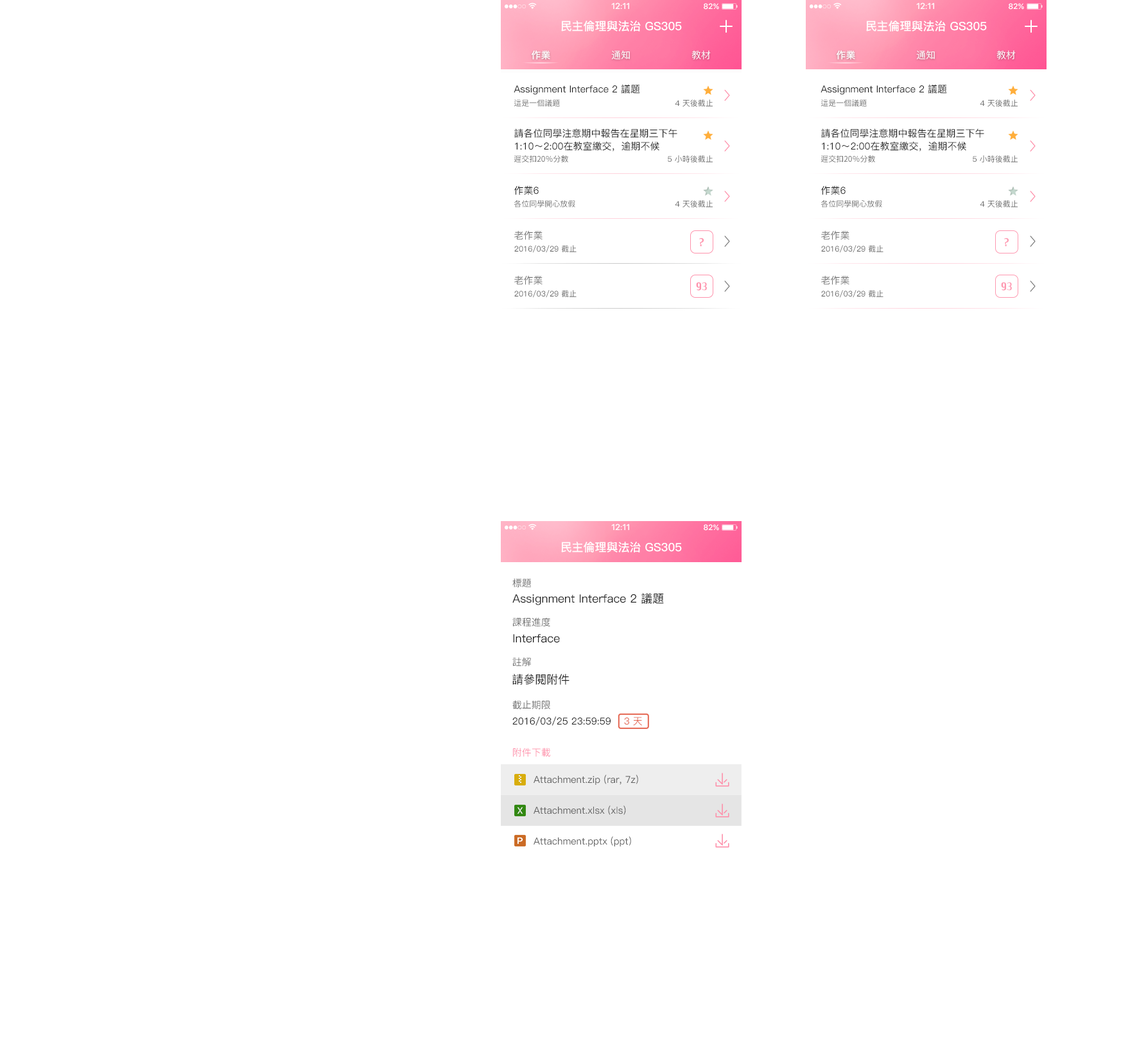
<style>
.page{position:relative;width:1130px;height:1055px;background:#ffffff}
.page>*{position:absolute;margin:0}
.t1{font:11.6px "PingFang-SC-Bold";color:#ffffff}
.t2{font:9.6px "PingFang-SC-Bold";color:#ffffff}
.t3{font:9.6px "PingFang-SC-Medium";color:#ffffff}
.t4{font:9.6px "PingFang-SC-Medium";color:#212121}
.t5{font:7.7px "GenJyuuGothic-Normal";color:#616161}
.t6{font:7.7px "PingFang-SC-Medium";color:#616161}
.t7{font:9.6px/12.8px "PingFang-SC-Medium";color:#212121}
.t8{font:9.6px "PingFang-SC-Medium";color:#757575}
.t9{font:11.6px "CreditValley-bold";color:#fe88a4}
.t10{font:8.3px "SFUIDisplay-Semibold"}
.t11{font:7.7px "SFUIDisplay-Semibold";letter-spacing:0.025em}
.t12{font:9.6px "GenJyuuGothic-Normal";color:#616161}
.t13{font:11.6px "PingFang-SC-Medium";color:#212121}
.t14{font:9.6px "PingFang-SC-Medium";color:#e36550}
.t15{font:9.6px "GenJyuuGothic-Normal";color:#fe8ea9}
.t16{font:9.6px "PingFang-SC-Medium";color:#616161}
</style>
<div class="page">
<p class="t1" style="left:561px;top:21px;width:121px;height:10px">民主倫理與法治 GS305</p>
<p class="t1" style="left:866px;top:21px;width:121px;height:10px">民主倫理與法治 GS305</p>
<p class="t2" style="left:532px;top:50px;width:18px;height:10px">作業</p>
<p class="t3" style="left:611px;top:50px;width:19px;height:10px">通知</p>
<p class="t3" style="left:691px;top:50px;width:20px;height:10px">教材</p>
<p class="t2" style="left:836px;top:50px;width:19px;height:10px">作業</p>
<p class="t3" style="left:916px;top:50px;width:19px;height:10px">通知</p>
<p class="t3" style="left:996px;top:50px;width:20px;height:10px">教材</p>
<p class="t4" style="left:514px;top:84px;width:126px;height:11px">Assignment Interface 2 議題</p>
<p class="t4" style="left:820px;top:84px;width:127px;height:11px">Assignment Interface 2 議題</p>
<p class="t5" style="left:514px;top:100px;width:46px;height:7px">這是一個議題</p>
<p class="t6" style="left:675px;top:100px;width:38px;height:7px">4 天後截止</p>
<p class="t5" style="left:820px;top:100px;width:47px;height:7px">這是一個議題</p>
<p class="t6" style="left:980px;top:100px;width:38px;height:7px">4 天後截止</p>
<p class="t7" style="left:514px;top:128px;width:163px;height:24px">請各位同學注意期中報告在星期三下午1:10～2:00在教室繳交，逾期不候</p>
<p class="t7" style="left:821px;top:128px;width:163px;height:24px">請各位同學注意期中報告在星期三下午1:10～2:00在教室繳交，逾期不候</p>
<p class="t5" style="left:514px;top:155px;width:54px;height:7px">遲交扣20％分數</p>
<p class="t6" style="left:668px;top:155px;width:45px;height:8px">5 小時後截止</p>
<p class="t5" style="left:820px;top:155px;width:55px;height:7px">遲交扣20％分數</p>
<p class="t6" style="left:973px;top:155px;width:45px;height:8px">5 小時後截止</p>
<p class="t4" style="left:514px;top:186px;width:25px;height:9px">作業6</p>
<p class="t4" style="left:821px;top:186px;width:24px;height:9px">作業6</p>
<p class="t5" style="left:514px;top:200px;width:61px;height:7px">各位同學開心放假</p>
<p class="t6" style="left:675px;top:200px;width:38px;height:8px">4 天後截止</p>
<p class="t5" style="left:820px;top:200px;width:62px;height:7px">各位同學開心放假</p>
<p class="t6" style="left:980px;top:200px;width:38px;height:8px">4 天後截止</p>
<p class="t8" style="left:514px;top:230px;width:28px;height:10px">老作業</p>
<p class="t8" style="left:821px;top:230px;width:28px;height:10px">老作業</p>
<p class="t6" style="left:514px;top:245px;width:62px;height:8px">2016/03/29 截止</p>
<p class="t9" style="left:699px;top:238px;width:5px;height:9px">?</p>
<p class="t6" style="left:821px;top:245px;width:62px;height:8px">2016/03/29 截止</p>
<p class="t9" style="left:1004px;top:238px;width:5px;height:9px">?</p>
<p class="t8" style="left:514px;top:275px;width:28px;height:10px">老作業</p>
<p class="t8" style="left:821px;top:275px;width:28px;height:10px">老作業</p>
<p class="t6" style="left:514px;top:290px;width:62px;height:8px">2016/03/29 截止</p>
<p class="t9" style="left:696px;top:282px;width:11px;height:9px">93</p>
<p class="t6" style="left:821px;top:290px;width:62px;height:8px">2016/03/29 截止</p>
<p class="t9" style="left:1001px;top:282px;width:11px;height:9px">93</p>
<p class="t10" style="left:612px;top:524px;width:18px;height:7px">12:11</p>
<p class="t11" style="left:704px;top:525px;width:15px;height:6px">82%</p>
<p class="t1" style="left:561px;top:542px;width:121px;height:11px">民主倫理與法治 GS305</p>
<p class="t12" style="left:512px;top:578px;width:19px;height:10px">標題</p>
<p class="t13" style="left:512px;top:593px;width:152px;height:12px">Assignment Interface 2 議題</p>
<p class="t12" style="left:512px;top:618px;width:38px;height:9px">課程進度</p>
<p class="t13" style="left:513px;top:634px;width:47px;height:9px">Interface</p>
<p class="t12" style="left:512px;top:657px;width:19px;height:9px">註解</p>
<p class="t13" style="left:512px;top:674px;width:57px;height:11px">請參閱附件</p>
<p class="t12" style="left:512px;top:700px;width:38px;height:10px">截止期限</p>
<p class="t4" style="left:512px;top:716px;width:99px;height:10px">2016/03/25 23:59:59</p>
<p class="t14" style="left:624px;top:717px;width:18px;height:9px">3 天</p>
<p class="t15" style="left:513px;top:748px;width:37px;height:10px">附件下載</p>
<p class="t16" style="left:533px;top:775px;width:105px;height:10px">Attachment.zip (rar, 7z)</p>
<p class="t16" style="left:533px;top:806px;width:93px;height:9px">Attachment.xlsx (xls)</p>
<p class="t16" style="left:533px;top:836px;width:98px;height:11px">Attachment.pptx (ppt)</p>
</div>
